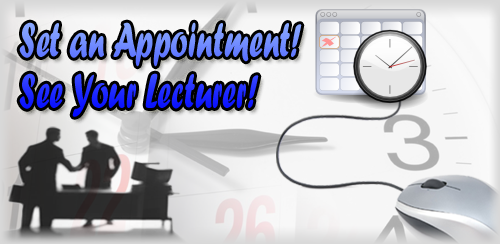
<style>
.page{position:relative;width:500px;height:244px}
.page>*{position:absolute;margin:0}
.t1{font:51px/25.5px "ForteMT";scale:0.64 1}
</style>
<div class="page">
<p class="t1" style="left:19px;top:22px;width:283px;height:95px">Set an Appointment!<br><br>See Your Lecturer!<br><br><br><br><br><br><br><br><br>See<br>See your Lecturer!</p>
</div>
